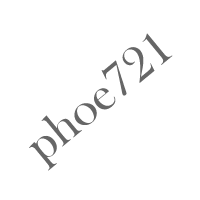
<style>
.page{position:relative;width:200px;height:200px;background:#ffffff}
.page>*{position:absolute;margin:0}
.t1{font:50px "BaskOldFace";color:#666666}
</style>
<div class="page">
<p class="t1" style="left:29px;top:33px;width:144px;height:138px;rotate:-40deg">phoe721</p>
</div>
